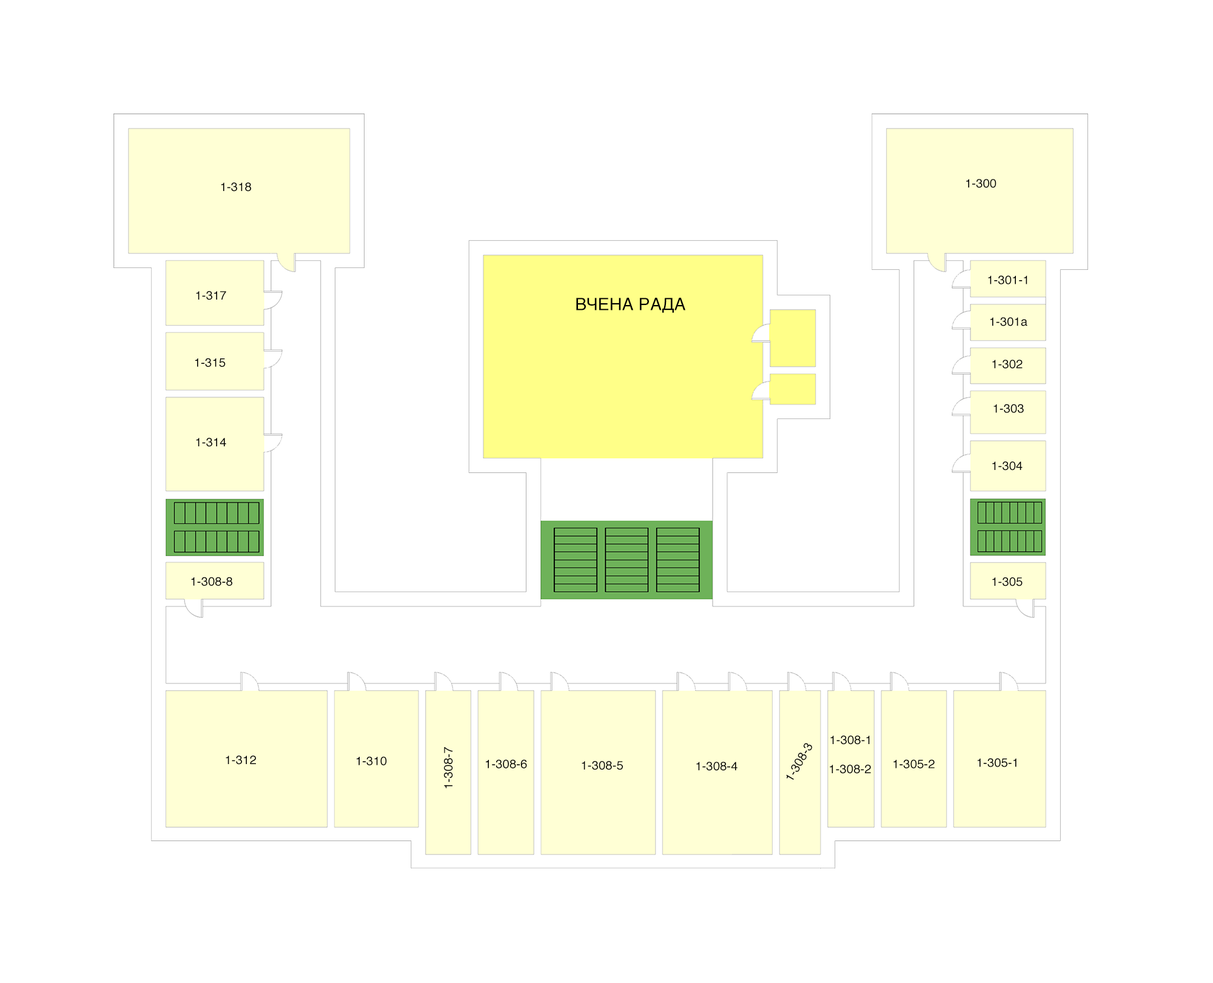
<style>
.page{position:relative;width:1213px;height:983px;background:#ffffff}
.page>*{position:absolute;margin:0}
.t1{font:12.1px "Helvetica";letter-spacing:0.01em;color:#000000}
.t2{font:17.1px "Helvetica";letter-spacing:0.01em;color:#000000}
</style>
<div class="page">
<p class="t1" style="left:221px;top:183px;width:30px;height:9px">1-318</p>
<p class="t1" style="left:966px;top:179px;width:30px;height:9px">1-300</p>
<p class="t1" style="left:988px;top:275px;width:39px;height:9px">1-301-1</p>
<p class="t1" style="left:196px;top:291px;width:30px;height:9px">1-317</p>
<p class="t2" style="left:576px;top:298px;width:109px;height:15px">ВЧЕНА РАДА</p>
<p class="t1" style="left:990px;top:317px;width:37px;height:9px">1-301а</p>
<p class="t1" style="left:195px;top:358px;width:31px;height:9px">1-315</p>
<p class="t1" style="left:992px;top:360px;width:31px;height:9px">1-302</p>
<p class="t1" style="left:993px;top:404px;width:31px;height:9px">1-303</p>
<p class="t1" style="left:196px;top:438px;width:30px;height:9px">1-314</p>
<p class="t1" style="left:992px;top:462px;width:31px;height:9px">1-304</p>
<p class="t1" style="left:191px;top:577px;width:41px;height:9px">1-308-8</p>
<p class="t1" style="left:992px;top:577px;width:31px;height:9px">1-305</p>
<p class="t1" style="left:830px;top:736px;width:40px;height:9px">1-308-1</p>
<p class="t1" style="left:444px;top:747px;width:9px;height:41px;rotate:-90deg">1-308-7</p>
<p class="t1" style="left:786px;top:743px;width:26px;height:37px;rotate:-60deg">1-308-3</p>
<p class="t1" style="left:226px;top:756px;width:30px;height:9px">1-312</p>
<p class="t1" style="left:357px;top:756px;width:30px;height:9px">1-310</p>
<p class="t1" style="left:486px;top:759px;width:41px;height:9px">1-308-6</p>
<p class="t1" style="left:582px;top:761px;width:41px;height:9px">1-308-5</p>
<p class="t1" style="left:696px;top:762px;width:41px;height:9px">1-308-4</p>
<p class="t1" style="left:893px;top:759px;width:42px;height:9px">1-305-2</p>
<p class="t1" style="left:977px;top:758px;width:39px;height:9px">1-305-1</p>
<p class="t1" style="left:830px;top:765px;width:41px;height:9px">1-308-2</p>
</div>
